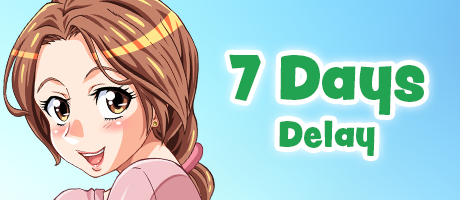
<style>
.page{position:relative;width:460px;height:200px}
.page>*{position:absolute;margin:0}
.t1{font:68px "PeachyKeenJF";color:#21a352}
.t2{font:39.8px "PeachyKeenJF";color:#21a352}
</style>
<div class="page">
<p class="t1" style="left:229px;top:54px;width:196px;height:102px;text-align:center">7 Days<br><span class="t2">Delay</span></p>
</div>
